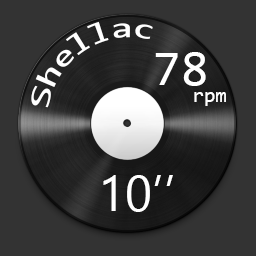
<style>
.page{position:relative;width:256px;height:256px;background:#333333}
.page>*{position:absolute;margin:0}
.t1{font:29.2px "Consolas";color:#ffffff}
.t2{font:50px "Consolas";color:#ffffff}
.t3{font:20.8px "Consolas";color:#ffffff}
.t4{font:50px "Ebrima";color:#ffffff}
</style>
<div class="page">
<p class="t1" style="left:31px;top:21px;width:122px;height:87px;rotate:-33deg">Shellac</p>
<p class="t2" style="left:155px;top:52px;width:51px;height:34px">78</p>
<p class="t3" style="left:194px;top:92px;width:32px;height:14px">rpm</p>
<p class="t4" style="left:103px;top:175px;width:70px;height:37px">10’’</p>
</div>
